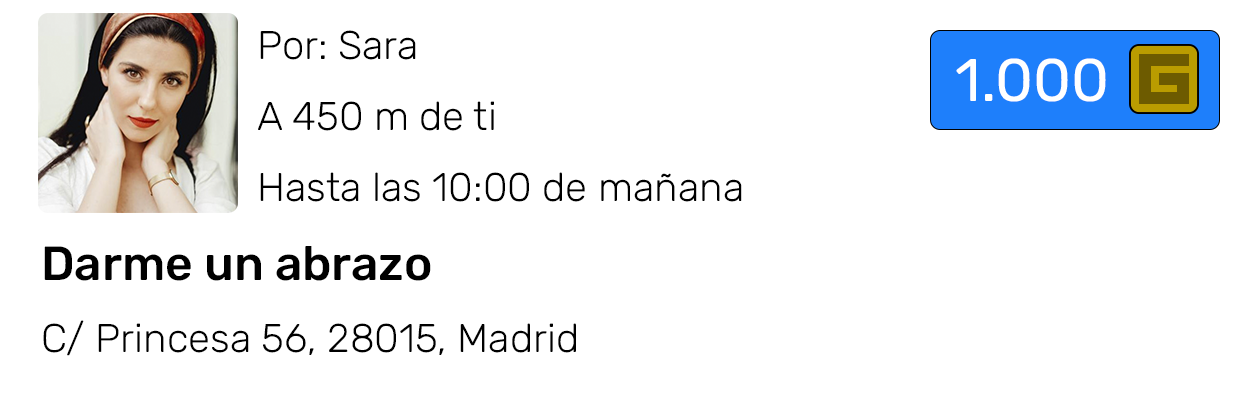
<style>
.page{position:relative;width:1250px;height:400px;background:#ffffff}
.page>*{position:absolute;margin:0}
.t1{font:40px "Rubik-Light";color:#000000}
.t2{font:10px "Roboto-Regular";color:#000000}
.t3{font:48px "Rubik-Medium";color:#000000}
.t4{font:60px "Rubik-Regular";color:#ffffff}
</style>
<div class="page">
<p class="t1" style="left:43px;top:30px;width:699px;height:326px"><span class="t2">      </span>Por: Sara<br><br><br>      A 450 m de ti<br><br><br>      Hasta las 10:00 de mañana<br><br><br><span class="t3">Darme un abrazo<br><br></span>C/ Princesa 56, 28015, Madrid</p>
<p class="t4" style="left:956px;top:58px;width:150px;height:44px">1.000</p>
</div>
